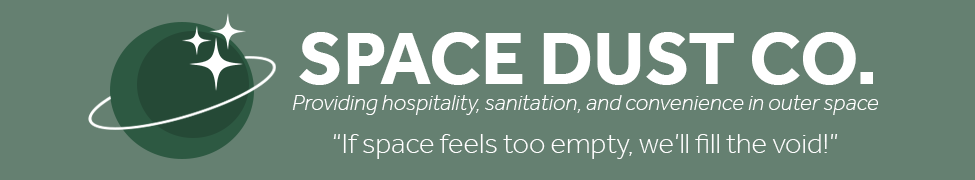
<style>
.page{position:relative;width:975px;height:180px;background:#658071}
.page>*{position:absolute;margin:0}
.t1{font:76.1px "Effra-Bold";color:#ffffff}
.t2{font:23.3px "Effra-LightItalic";color:#ffffff}
.t3{font:29px "Effra-Light";color:#ffffff}
</style>
<div class="page">
<p class="t1" style="left:299px;top:32px;width:574px;height:53px">SPACE DUST CO.</p>
<p class="t2" style="left:292px;top:95px;width:586px;height:20px">Providing hospitality, sanitation, and convenience in outer space</p>
<p class="t3" style="left:333px;top:134px;width:505px;height:25px">“If space feels too empty, we’ll fill the void!”</p>
</div>
